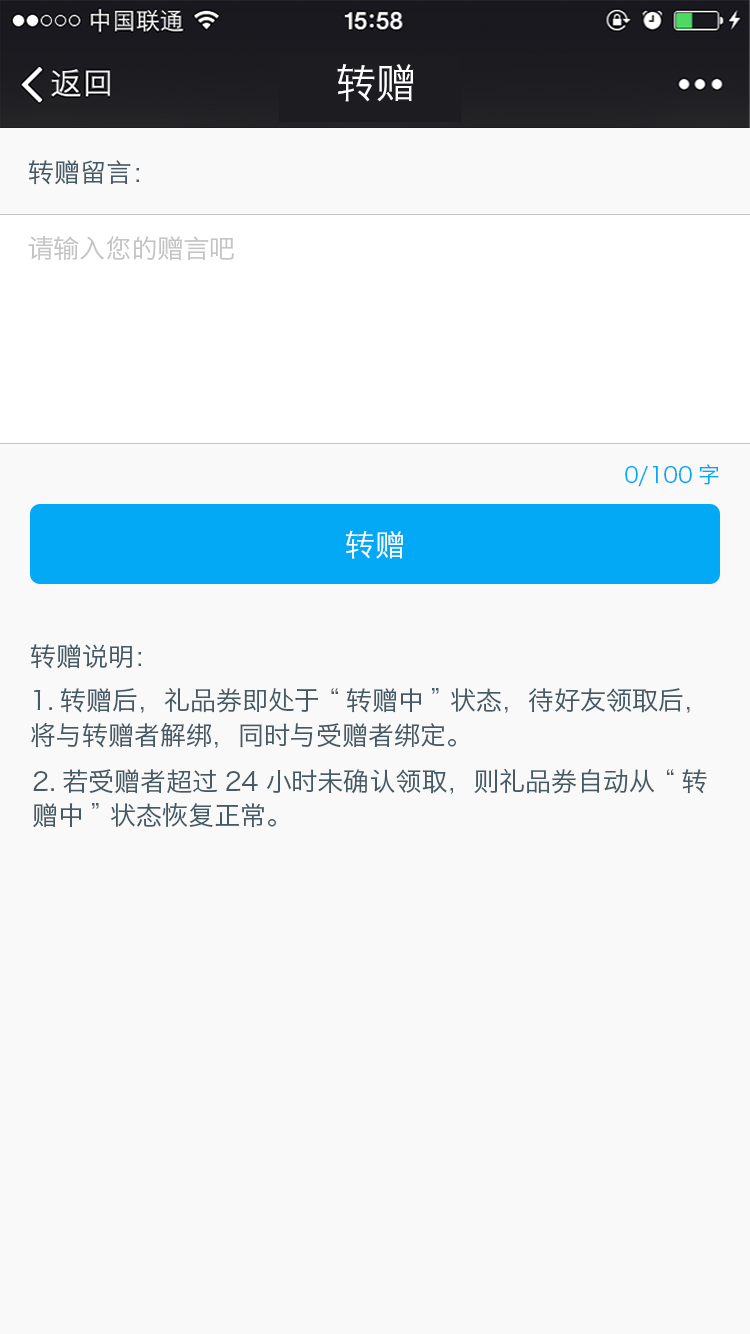
<style>
.page{position:relative;width:750px;height:1334px;background:#f9f9f9}
.page>*{position:absolute;margin:0}
.t1{font:40px "HiraginoSansGB-W3";color:#ffffff}
.t2{font:26px "HiraginoSansGB-W3";color:#455a64}
.t3{font:26px "HiraginoSansGB-W3";color:#c4c4c4}
.t4{font:22px "HiraginoSansGB-W3";color:#03a9f4}
.t5{font:30px "HiraginoSansGB-W3";color:#ffffff}
.t6{font:26px/35px "HiraginoSansGB-W3";color:#455a64}
.t7{font:26px/34px "HiraginoSansGB-W3";color:#455a64}
</style>
<div class="page">
<p class="t1" style="left:337px;top:64px;width:77px;height:38px">转赠</p>
<p class="t2" style="left:28px;top:160px;width:111px;height:25px">转赠留言：</p>
<p class="t3" style="left:28px;top:236px;width:206px;height:25px">请输入您的赠言吧</p>
<p class="t4" style="left:625px;top:464px;width:94px;height:23px">0/100字</p>
<p class="t5" style="left:346px;top:530px;width:57px;height:29px">转赠</p>
<p class="t2" style="left:30px;top:644px;width:111px;height:25px">转赠说明：</p>
<p class="t6" style="left:31px;top:687px;width:659px;height:61px">1.转赠后，礼品券即处于“转赠中”状态，待好友领取后，<br>将与转赠者解绑，同时与受赠者绑定。</p>
<p class="t7" style="left:33px;top:768px;width:674px;height:60px">2.若受赠者超过24小时未确认领取，则礼品券自动从“转<br>赠中”状态恢复正常。</p>
</div>
